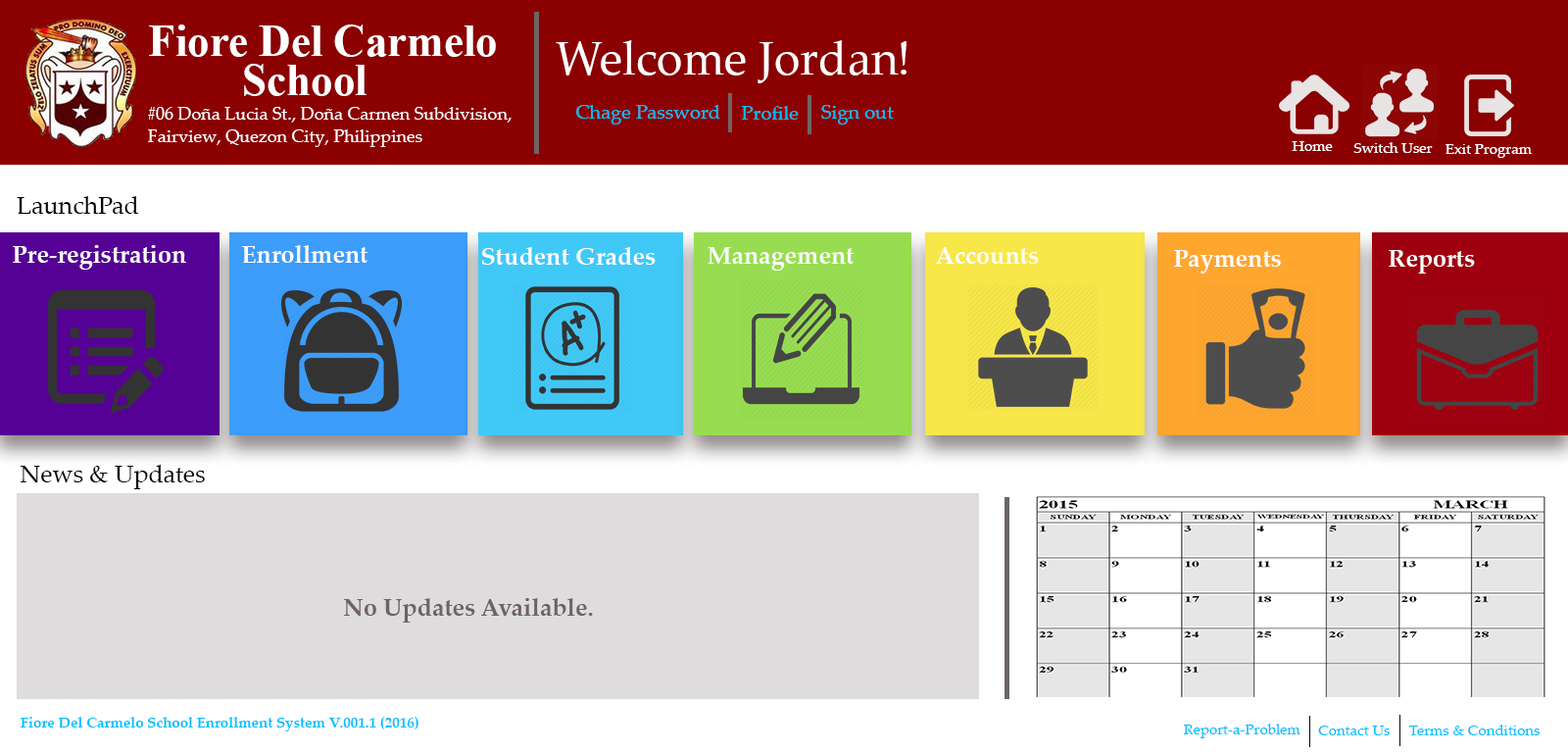
<style>
.page{position:relative;width:1568px;height:753px;background:#ffffff}
.page>*{position:absolute;margin:0}
.t1{font:44.1px "TimesNewRomanPS-BoldMT";color:#ffffff}
.t2{font:47px "PalatinoLinotype-Roman";color:#ffffff}
.t3{font:17.6px "PalatinoLinotype-Roman";color:#ffffff}
.t4{font:19.6px "PalatinoLinotype-Roman";color:#00bfff}
.t5{font:14.7px "PalatinoLinotype-Roman";color:#ffffff}
.t6{font:24.5px "PalatinoLinotype-Roman";color:#030303}
.t7{font:24.5px "PalatinoLinotype-Bold";color:#fdfcfc}
.t8{font:24.5px "PalatinoLinotype-Roman";color:#060606}
.t9{font:24.5px "PalatinoLinotype-Bold";color:#6e6262}
.t10{font:14.7px "PalatinoLinotype-Bold";color:#00bfff}
.t11{font:14.7px "PalatinoLinotype-Roman";color:#00bfff}
</style>
<div class="page">
<p class="t1" style="left:149px;top:24px;width:347px;height:33px">Fiore Del Carmelo</p>
<p class="t2" style="left:556px;top:40px;width:350px;height:43px">Welcome Jordan!</p>
<p class="t1" style="left:244px;top:64px;width:123px;height:32px">School</p>
<p class="t3" style="left:148px;top:107px;width:364px;height:15px">#06 Doña Lucia St., Doña Carmen Subdivision,</p>
<p class="t4" style="left:576px;top:105px;width:144px;height:19px">Chage Password</p>
<p class="t4" style="left:741px;top:106px;width:58px;height:14px">Profile</p>
<p class="t4" style="left:821px;top:105px;width:73px;height:19px">Sign out</p>
<p class="t3" style="left:148px;top:129px;width:274px;height:18px">Fairview, Quezon City, Philippines</p>
<p class="t5" style="left:1292px;top:141px;width:41px;height:10px">Home</p>
<p class="t5" style="left:1353px;top:142px;width:80px;height:11px">Switch User</p>
<p class="t5" style="left:1446px;top:144px;width:86px;height:14px">Exit Program</p>
<p class="t6" style="left:17px;top:196px;width:121px;height:18px">LaunchPad</p>
<p class="t7" style="left:13px;top:245px;width:173px;height:25px">Pre-registration</p>
<p class="t7" style="left:242px;top:245px;width:126px;height:18px">Enrollment</p>
<p class="t7" style="left:481px;top:247px;width:175px;height:18px">Student Grades</p>
<p class="t7" style="left:708px;top:247px;width:146px;height:23px">Management</p>
<p class="t7" style="left:936px;top:247px;width:103px;height:17px">Accounts</p>
<p class="t7" style="left:1174px;top:250px;width:107px;height:23px">Payments</p>
<p class="t7" style="left:1389px;top:250px;width:86px;height:23px">Reports</p>
<p class="t8" style="left:20px;top:465px;width:185px;height:24px">News &amp; Updates</p>
<p class="t9" style="left:344px;top:598px;width:249px;height:24px">No Updates Available.</p>
<p class="t10" style="left:21px;top:716px;width:397px;height:15px">Fiore Del Carmelo School Enrollment System V.001.1 (2016)</p>
<p class="t11" style="left:1183px;top:723px;width:117px;height:15px">Report-a-Problem</p>
<p class="t11" style="left:1318px;top:725px;width:72px;height:10px">Contact Us</p>
<p class="t11" style="left:1408px;top:724px;width:132px;height:11px">Terms &amp; Conditions</p>
</div>
